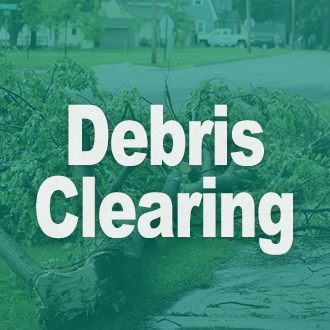
<style>
.page{position:relative;width:330px;height:330px}
.page>*{position:absolute;margin:0}
.t1{font:84px/72px "Arial-Black";letter-spacing:-0.025em;color:#ffffff;scale:0.71 1}
</style>
<div class="page">
<p class="t1" style="left:36px;top:104px;width:257px;height:151px;text-align:center;opacity:0.85">Debris<br>Clearing</p>
</div>
